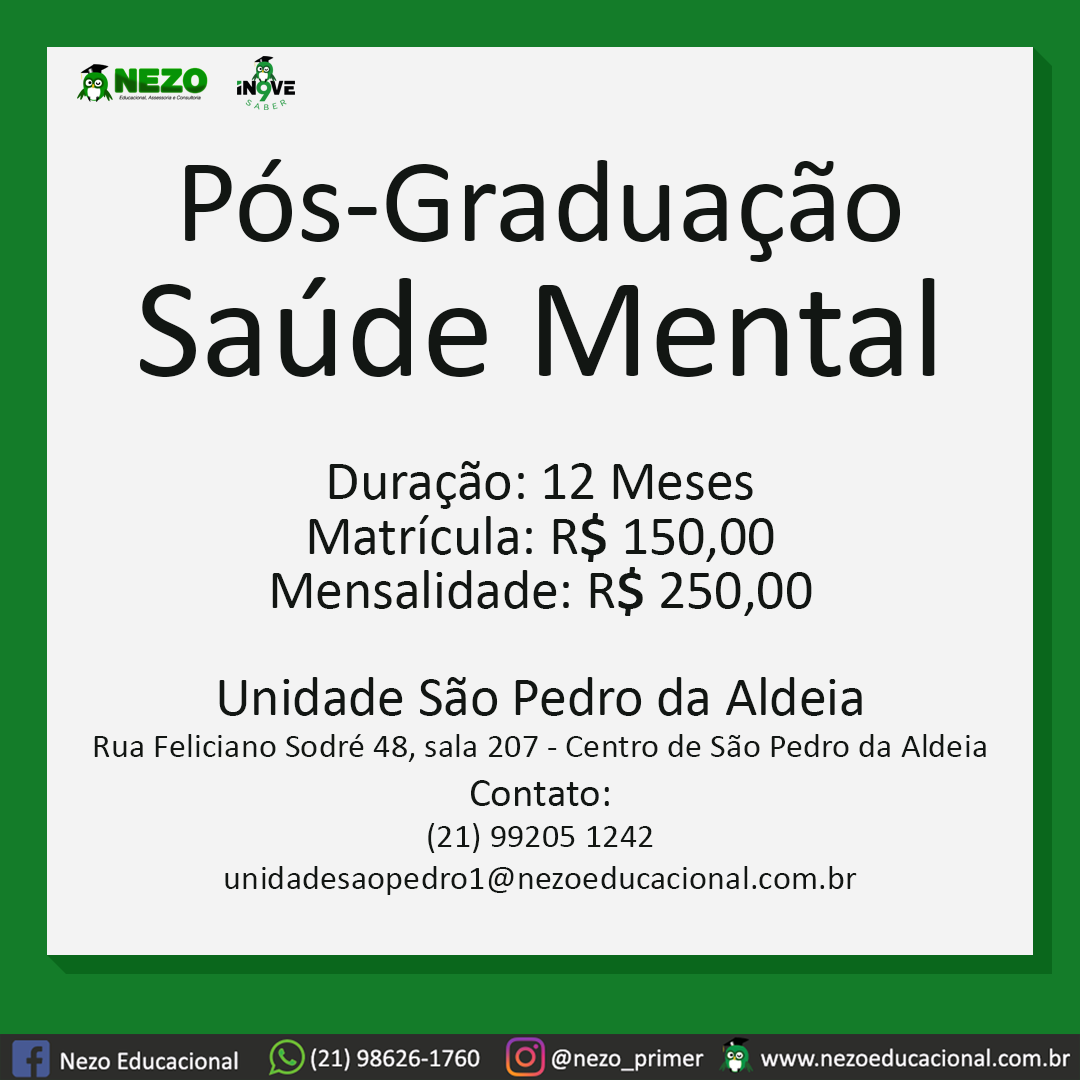
<style>
.page{position:relative;width:1080px;height:1080px;background:#f3f3f3}
.page>*{position:absolute;margin:0}
.t1{font:119.5px "Calibri";color:#121613}
.t2{font:144.4px/135.4px "Calibri";color:#121613}
.t3{font:34.4px "Calibri";color:#121613}
.t4{font:55.5px/72px "Calibri";color:#121613}
.t5{font:55.5px/54.4px "Calibri";color:#121613}
.t6{font:55.5px/54.4px "Calibri";color:#121613;font-weight:bold}
.t7{font:55.5px "Calibri";color:#121613}
.t8{font:41.1px "Calibri";color:#121613}
</style>
<div class="page">
<p class="t1" style="left:139px;top:159px;width:796px;height:218px;text-align:center">Pós-Graduação<br><span class="t2">Saúde Mental</span></p>
<p class="t3" style="left:94px;top:461px;width:892px;height:434px;text-align:center"><span class="t4">Duração: 12 Meses<br></span><span class="t5">Matrícula: R</span><span class="t6">$</span><span class="t5"> 150,00<br>Mensalidade: R</span><span class="t6">$ </span><span class="t5">250,00<br><br></span><span class="t7">Unidade São Pedro da Aldeia<br></span>Rua Feliciano Sodré 48, sala 207 - Centro de São Pedro da Aldeia<br><span class="t8">Contato:<br></span>(21) 99205 1242<br>unidadesaopedro1@nezoeducacional.com.br</p>
</div>
